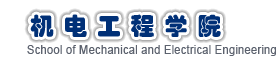
<style>
.page{position:relative;width:280px;height:57px;background:#ffffff}
.page>*{position:absolute;margin:0}
.t1{font:24px "STHupo";letter-spacing:0.075em;color:#003077}
.t2{font:12px "ArialMT";letter-spacing:0.015em;color:#5c626e;scale:0.94 1}
</style>
<div class="page">
<p class="t1" style="left:30px;top:14px;width:191px;height:23px">机 电 工 程 学 院</p>
<p class="t2" style="left:27px;top:45px;width:249px;height:11px">School of Mechanical and Electrical Engineering</p>
</div>
